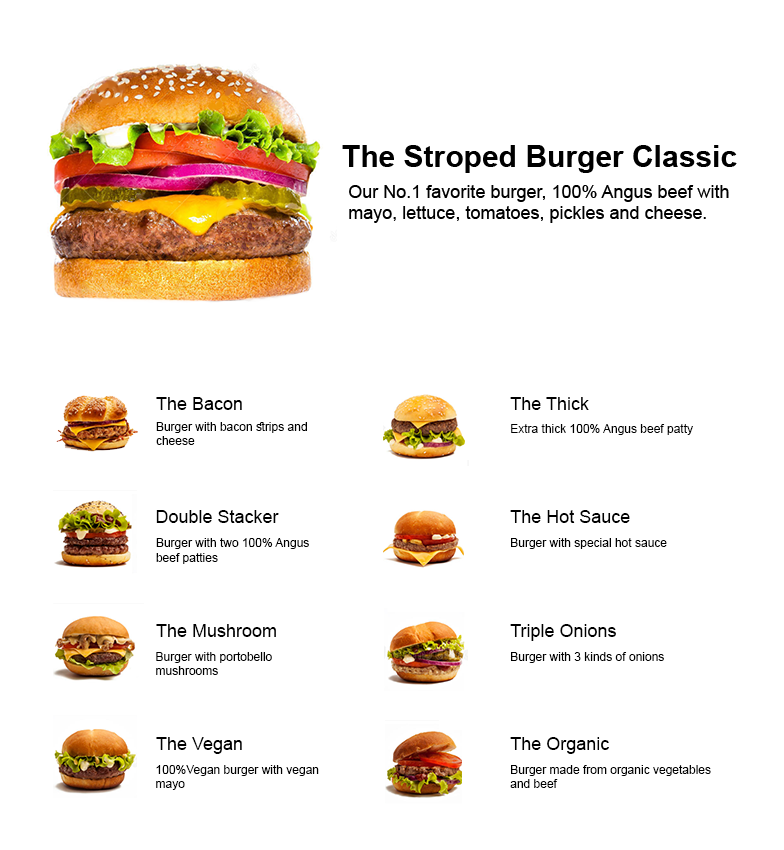
<style>
.page{position:relative;width:784px;height:850px;background:#ffffff}
.page>*{position:absolute;margin:0}
.t1{font:18px "ArialMT";color:#000000}
.t2{font:12px "ArialMT";color:#000000}
</style>
<div class="page">
<p class="t1" style="left:156px;top:397px;width:86px;height:13px">The Bacon</p>
<p class="t1" style="left:510px;top:397px;width:79px;height:13px">The Thick</p>
<p class="t2" style="left:156px;top:422px;width:151px;height:23px;text-align:right">Burger with bacon strips and cheese</p>
<p class="t2" style="left:511px;top:424px;width:182px;height:11px">Extra thick 100% Angus beef patty</p>
<p class="t1" style="left:156px;top:510px;width:123px;height:13px">Double Stacker</p>
<p class="t1" style="left:510px;top:510px;width:120px;height:13px">The Hot Sauce</p>
<p class="t2" style="left:156px;top:538px;width:153px;height:26px;text-align:right">Burger with two 100% Angus beef patties</p>
<p class="t2" style="left:511px;top:538px;width:156px;height:11px">Burger with special hot sauce</p>
<p class="t1" style="left:156px;top:624px;width:120px;height:13px">The Mushroom</p>
<p class="t1" style="left:510px;top:624px;width:106px;height:17px">Triple Onions</p>
<p class="t2" style="left:156px;top:652px;width:116px;height:23px;text-align:right">Burger with portobello mushrooms</p>
<p class="t2" style="left:511px;top:652px;width:153px;height:11px">Burger with 3 kinds of onions</p>
<p class="t1" style="left:156px;top:737px;width:86px;height:17px">The Vegan</p>
<p class="t1" style="left:510px;top:737px;width:99px;height:17px">The Organic</p>
<p class="t2" style="left:156px;top:765px;width:163px;height:25px;text-align:right">100%Vegan burger with vegan <br>mayo</p>
<p class="t2" style="left:510px;top:765px;width:201px;height:23px;text-align:right">Burger made from organic vegetables and beef</p>
</div>
